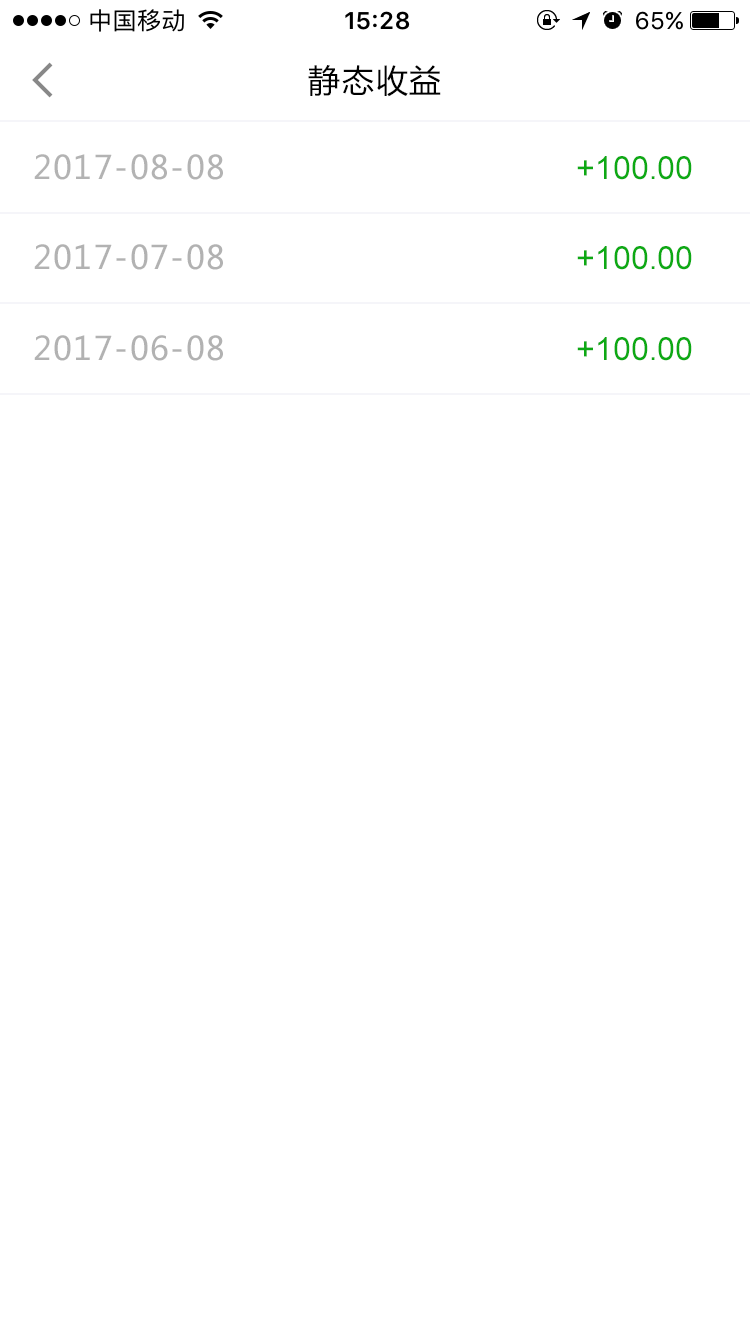
<style>
.page{position:relative;width:750px;height:1334px;background:#ffffff}
.page>*{position:absolute;margin:0}
.t1{font:32px "MicrosoftYaHei";letter-spacing:0.05em;color:#000000}
.t2{font:32px "MicrosoftYaHei";letter-spacing:0.05em;color:#b2b2b2}
.t3{font:32px "ArialMT";color:#0da914}
</style>
<div class="page">
<p class="t1" style="left:308px;top:65px;width:133px;height:32px">静态收益</p>
<p class="t2" style="left:34px;top:154px;width:189px;height:26px">2017-08-08</p>
<p class="t3" style="left:577px;top:156px;width:115px;height:24px">+100.00</p>
<p class="t2" style="left:34px;top:244px;width:189px;height:26px">2017-07-08</p>
<p class="t3" style="left:577px;top:246px;width:115px;height:24px">+100.00</p>
<p class="t2" style="left:34px;top:335px;width:189px;height:26px">2017-06-08</p>
<p class="t3" style="left:577px;top:337px;width:115px;height:24px">+100.00</p>
</div>
